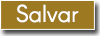
<style>
.page{position:relative;width:100px;height:36px;background:#9d7922}
.page>*{position:absolute;margin:0}
.t1{font:24px "Arcon-Regular";color:#ffffff}
</style>
<div class="page">
<p class="t1" style="left:16px;top:4px;width:63px;height:19px">Salvar</p>
</div>
